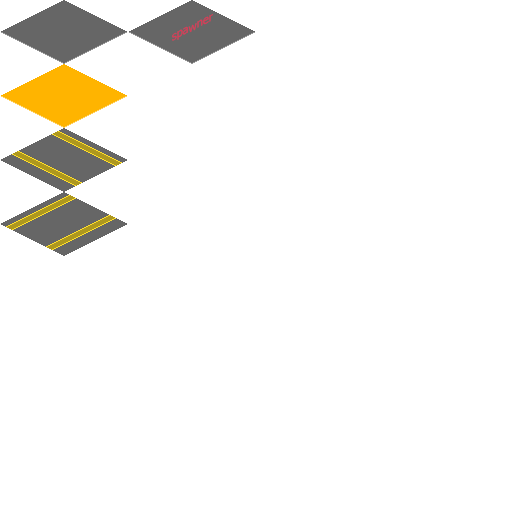
<style>
.page{position:relative;width:512px;height:512px;background:#ffffff}
.page>*{position:absolute;margin:0}
.t1{font:11px "Tahoma";color:#db3957;scale:1.12 1}
</style>
<div class="page">
<p class="t1" style="left:172px;top:14px;width:41px;height:27px;rotate:-27deg">spawner</p>
</div>
